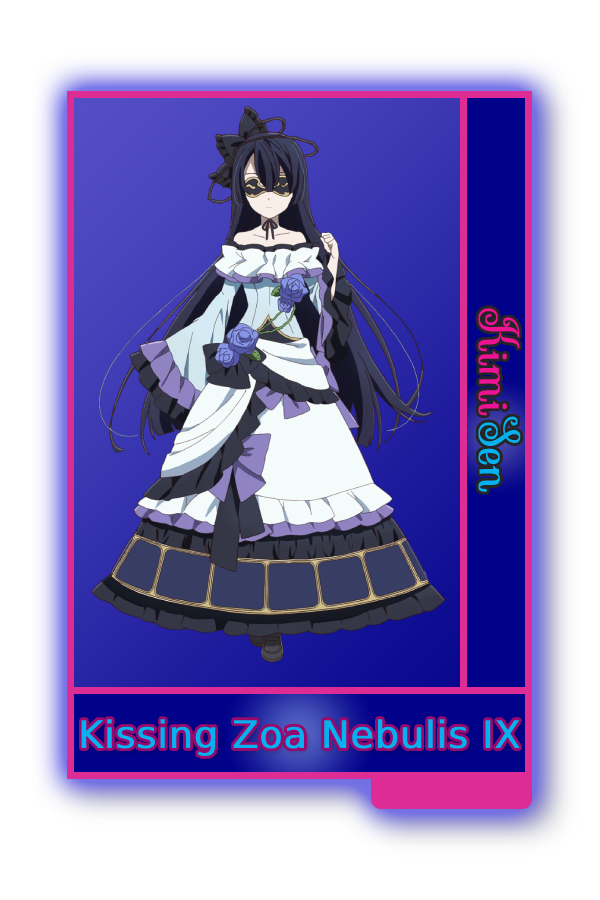
<style>
.page{position:relative;width:600px;height:900px;background:#ffffff}
.page>*{position:absolute;margin:0}
.t1{font:48.8px "Sevillana-Regular";color:#ee1294;font-weight:bold}
.t2{font:48.8px "Sevillana-Regular";color:#07b0ef;font-weight:bold}
.t3{font:38px "CoolveticaRg-Regular";color:#07b0ef;font-weight:bold}
</style>
<div class="page">
<p class="t1" style="left:478px;top:308px;width:43px;height:184px;rotate:90deg">Kimi<span class="t2">Sen</span></p>
<p class="t3" style="left:81px;top:719px;width:439px;height:37px">Kissing Zoa Nebulis IX</p>
</div>
